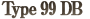
<style>
.page{position:relative;width:90px;height:19px;background:#ffffff}
.page>*{position:absolute;margin:0}
.t1{font:18px "RyuminPro-ExBold";letter-spacing:-0.08em;color:#4a3f32;font-weight:bold;scale:0.9 1}
</style>
<div class="page">
<p class="t1" style="left:1px;top:1px;width:82px;height:18px">Type 99 DB</p>
</div>
